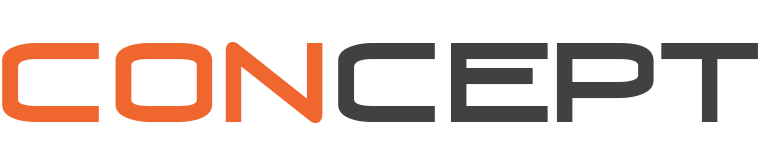
<style>
.page{position:relative;width:759px;height:168px;background:#ffffff}
.page>*{position:absolute;margin:0}
.t1{font:106.9px "VenusRising";color:#414143}
.t2{font:106.9px "VenusRising";color:#ef662f}
</style>
<div class="page">
<p class="t1" style="left:2px;top:42px;width:756px;height:81px"><span class="t2">CON</span>CEPT</p>
</div>
